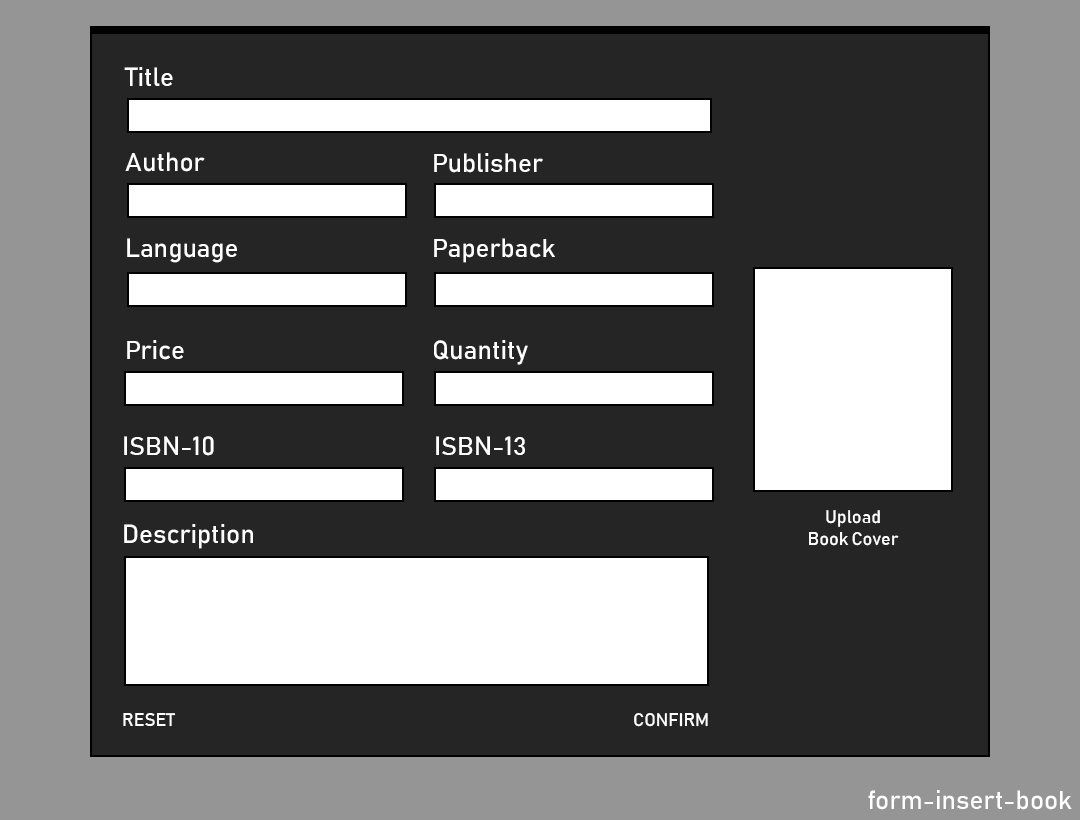
<style>
.page{position:relative;width:1080px;height:820px;background:#252525}
.page>*{position:absolute;margin:0}
.t1{font:26px "Bahnschrift";color:#ffffff}
.t2{font:18px "Bahnschrift";color:#ffffff}
.t3{font:26px "Bahnschrift";color:#fefefe}
</style>
<div class="page">
<p class="t1" style="left:124px;top:67px;width:49px;height:19px">Title</p>
<p class="t1" style="left:125px;top:152px;width:80px;height:20px">Author</p>
<p class="t1" style="left:434px;top:153px;width:109px;height:20px">Publisher</p>
<p class="t1" style="left:127px;top:238px;width:110px;height:25px">Language</p>
<p class="t1" style="left:434px;top:238px;width:121px;height:25px">Paperback</p>
<p class="t1" style="left:127px;top:340px;width:57px;height:20px">Price</p>
<p class="t1" style="left:434px;top:340px;width:94px;height:25px">Quantity</p>
<p class="t1" style="left:124px;top:436px;width:90px;height:20px">ISBN-10</p>
<p class="t1" style="left:436px;top:436px;width:89px;height:19px">ISBN-13</p>
<p class="t2" style="left:809px;top:510px;width:90px;height:36px;text-align:center">Upload<br>Book Cover</p>
<p class="t1" style="left:124px;top:524px;width:129px;height:25px">Description</p>
<p class="t2" style="left:123px;top:713px;width:53px;height:14px">RESET</p>
<p class="t2" style="left:634px;top:713px;width:74px;height:14px">CONFIRM</p>
<p class="t3" style="left:868px;top:790px;width:204px;height:20px">form-insert-book</p>
</div>
